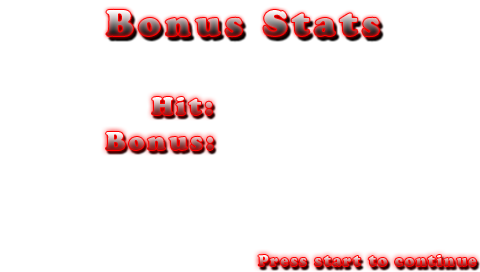
<style>
.page{position:relative;width:480px;height:272px;background:#ffffff}
.page>*{position:absolute;margin:0}
.t1{font:36px "CooperBlackStd";letter-spacing:0.125em}
.t2{font:25.6px "CooperBlackStd";letter-spacing:0.125em}
.t3{font:15px "CooperBlackStd";letter-spacing:0.125em;scale:0.97 1}
</style>
<div class="page">
<p class="t1" style="left:106px;top:9px;width:273px;height:28px">Bonus Stats</p>
<p class="t2" style="left:152px;top:97px;width:60px;height:18px">Hit:</p>
<p class="t2" style="left:106px;top:132px;width:107px;height:19px">Bonus:</p>
<p class="t3" style="left:258px;top:255px;width:218px;height:11px">Press start to continue</p>
</div>
